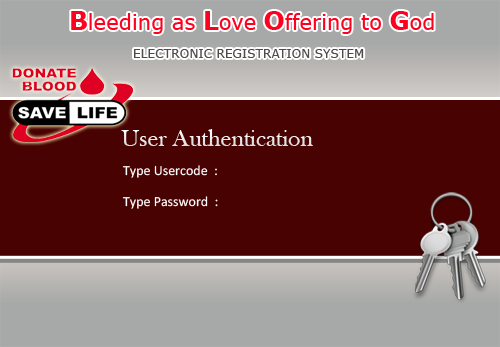
<style>
.page{position:relative;width:500px;height:347px;background:#490202}
.page>*{position:absolute;margin:0}
.t1{font:21.1px "Verdana";color:#ff001e}
.t2{font:24.7px "Verdana-Bold";color:#ff001e}
.t3{font:12.2px "Verdana";color:#4e4b4b}
.t4{font:24px "BaskOldFace";color:#e5e6e6}
.t5{font:14px "Calibri";color:#ffffff}
</style>
<div class="page">
<p class="t1" style="left:71px;top:11px;width:363px;height:23px"><span class="t2">B</span>leeding as <span class="t2">L</span>ove <span class="t2">O</span>ffering to <span class="t2">G</span>od</p>
<p class="t3" style="left:134px;top:49px;width:230px;height:9px">ELECTRONIC REGISTRATION SYSTEM</p>
<p class="t4" style="left:121px;top:129px;width:192px;height:17px">User Authentication</p>
<p class="t5" style="left:122px;top:165px;width:95px;height:13px">Type Usercode  :</p>
<p class="t5" style="left:122px;top:196px;width:96px;height:13px">Type Password  :</p>
</div>
